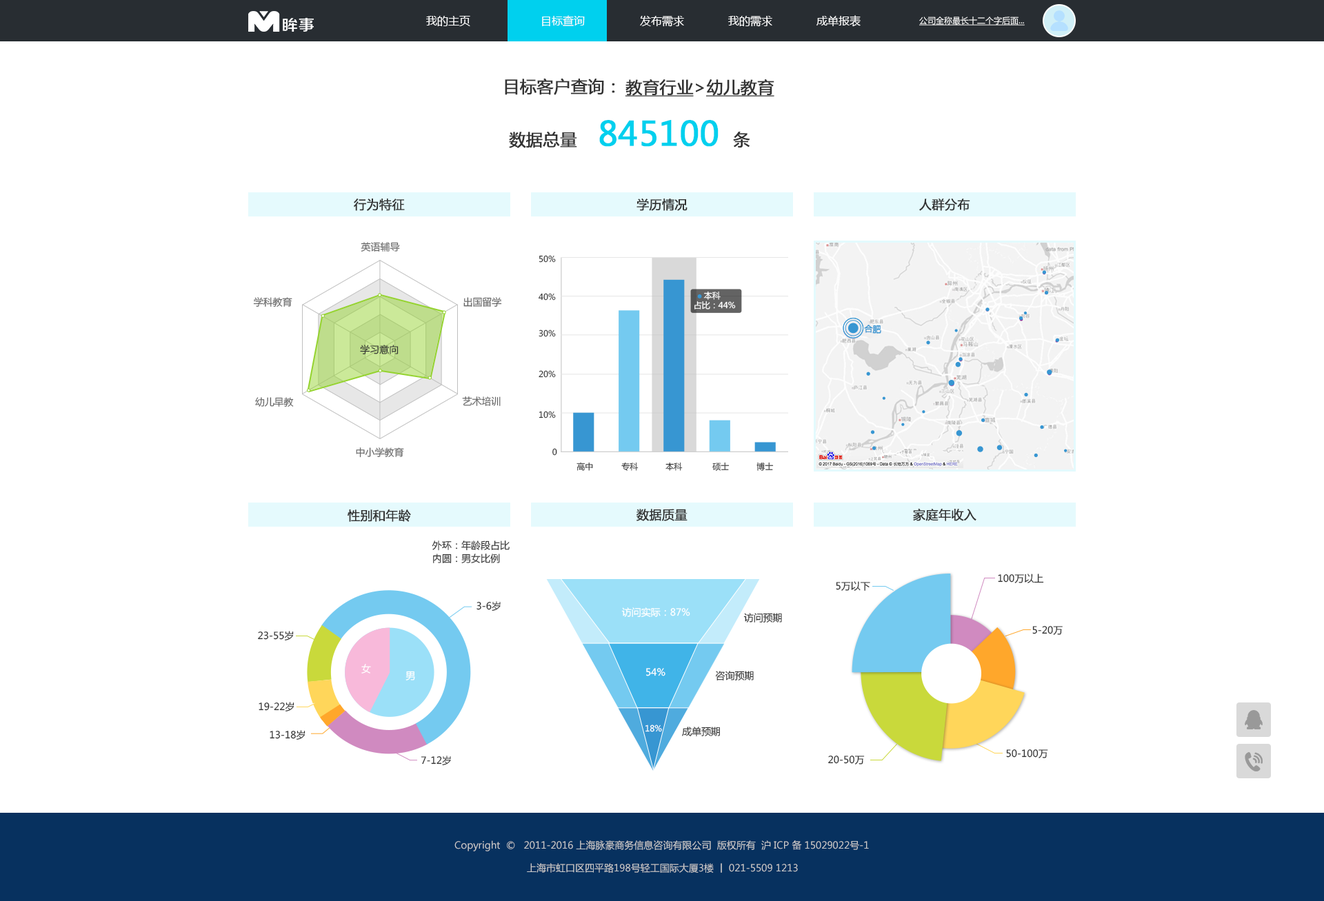
<style>
.page{position:relative;width:1324px;height:901px;background:#ffffff}
.page>*{position:absolute;margin:0}
.t1{font:11px "MicrosoftYaHei";color:#fcfcfc}
.t2{font:8.3px "MicrosoftYaHei";color:#ffffff;text-decoration:underline}
.t3{font:16.5px "MicrosoftYaHei";color:#333333;font-weight:bold}
.t4{font:16.5px "MicrosoftYaHei";color:#333333;font-weight:bold;text-decoration:underline}
.t5{font:33.1px "MicrosoftYaHei";color:#00d0ee;font-weight:bold}
.t6{font:12.4px "MicrosoftYaHei";color:#333333;font-weight:bold}
.t7{font:9.7px "MicrosoftYaHei";color:#666666}
.t8{font:8.3px "MicrosoftYaHei";color:#333333}
.t9{font:8.3px "MicrosoftYaHei";color:#ffffff}
.t10{font:8.3px "MicrosoftYaHei";color:#3796d2;font-weight:bold}
.t11{font:9.7px "MicrosoftYaHei";color:#333333}
.t12{font:8.3px "MicrosoftYaHei"}
.t13{font:9.7px "MicrosoftYaHei";color:#ffffff}
.t14{font:9.7px "MicrosoftYaHei";color:#cccccc}
</style>
<div class="page">
<p class="t1" style="left:426px;top:16px;width:44px;height:10px">我的主页</p>
<p class="t1" style="left:542px;top:15px;width:43px;height:11px">目标查询</p>
<p class="t1" style="left:640px;top:16px;width:44px;height:11px">发布需求</p>
<p class="t1" style="left:728px;top:16px;width:44px;height:11px">我的需求</p>
<p class="t1" style="left:816px;top:15px;width:44px;height:12px">成单报表</p>
<p class="t2" style="left:919px;top:16px;width:105px;height:10px">公司全称最长十二个字后面...</p>
<p class="t3" style="left:505px;top:78px;width:110px;height:17px">目标客户查询：</p>
<p class="t4" style="left:625px;top:79px;width:149px;height:18px">教育行业<span class="t3">&gt;</span>幼儿教育</p>
<p class="t5" style="left:599px;top:120px;width:151px;height:28px">845100 <span class="t3">条</span></p>
<p class="t3" style="left:509px;top:132px;width:68px;height:16px">数据总量</p>
<p class="t6" style="left:354px;top:199px;width:51px;height:12px">行为特征</p>
<p class="t6" style="left:636px;top:199px;width:51px;height:12px">学历情况</p>
<p class="t6" style="left:919px;top:199px;width:51px;height:12px">人群分布</p>
<p class="t7" style="left:361px;top:242px;width:39px;height:10px">英语辅导</p>
<p class="t8" style="left:538px;top:255px;width:18px;height:8px">50%</p>
<p class="t8" style="left:538px;top:293px;width:18px;height:8px">40%</p>
<p class="t9" style="left:703px;top:291px;width:17px;height:9px">本科</p>
<p class="t7" style="left:253px;top:297px;width:39px;height:10px">学科教育</p>
<p class="t7" style="left:463px;top:297px;width:39px;height:10px">出国留学</p>
<p class="t9" style="left:694px;top:301px;width:42px;height:9px">占比：44%</p>
<p class="t8" style="left:538px;top:330px;width:18px;height:7px">30%</p>
<p class="t10" style="left:864px;top:325px;width:17px;height:9px">合肥</p>
<p class="t11" style="left:360px;top:345px;width:38px;height:9px">学习意向</p>
<p class="t8" style="left:538px;top:370px;width:18px;height:8px">20%</p>
<p class="t7" style="left:255px;top:397px;width:39px;height:10px">幼儿早教</p>
<p class="t7" style="left:462px;top:396px;width:38px;height:10px">艺术培训</p>
<p class="t8" style="left:538px;top:411px;width:18px;height:7px">10%</p>
<p class="t7" style="left:356px;top:447px;width:48px;height:11px">中小学教育</p>
<p class="t8" style="left:552px;top:448px;width:5px;height:8px">0</p>
<p class="t8" style="left:576px;top:462px;width:17px;height:9px">高中</p>
<p class="t8" style="left:621px;top:462px;width:17px;height:9px">专科</p>
<p class="t8" style="left:665px;top:462px;width:17px;height:9px">本科</p>
<p class="t8" style="left:712px;top:462px;width:17px;height:9px">硕士</p>
<p class="t12" style="left:756px;top:462px;width:17px;height:9px">博士</p>
<p class="t6" style="left:347px;top:509px;width:64px;height:13px">性别和年龄</p>
<p class="t6" style="left:636px;top:509px;width:51px;height:12px">数据质量</p>
<p class="t6" style="left:913px;top:508px;width:63px;height:13px">家庭年收入</p>
<p class="t11" style="left:432px;top:540px;width:77px;height:11px">外环：年龄段占比</p>
<p class="t11" style="left:433px;top:554px;width:67px;height:9px">内圆：男女比例</p>
<p class="t11" style="left:835px;top:581px;width:35px;height:10px">5万以下</p>
<p class="t11" style="left:997px;top:574px;width:47px;height:9px">100万以上</p>
<p class="t11" style="left:476px;top:601px;width:24px;height:10px">3-6岁</p>
<p class="t13" style="left:621px;top:607px;width:69px;height:11px">访问实际：87%</p>
<p class="t11" style="left:743px;top:613px;width:39px;height:9px">访问预期</p>
<p class="t11" style="left:1032px;top:626px;width:30px;height:9px">5-20万</p>
<p class="t11" style="left:258px;top:631px;width:36px;height:10px">23-55岁</p>
<p class="t13" style="left:361px;top:664px;width:10px;height:9px">女</p>
<p class="t13" style="left:405px;top:671px;width:10px;height:9px">男</p>
<p class="t13" style="left:646px;top:668px;width:19px;height:8px">54%</p>
<p class="t11" style="left:715px;top:671px;width:38px;height:10px">咨询预期</p>
<p class="t11" style="left:258px;top:702px;width:36px;height:10px">19-22岁</p>
<p class="t9" style="left:645px;top:724px;width:17px;height:8px">18%</p>
<p class="t11" style="left:270px;top:730px;width:35px;height:10px">13-18岁</p>
<p class="t11" style="left:682px;top:727px;width:38px;height:10px">成单预期</p>
<p class="t11" style="left:1006px;top:749px;width:42px;height:9px">50-100万</p>
<p class="t11" style="left:420px;top:756px;width:31px;height:10px">7-12岁</p>
<p class="t11" style="left:828px;top:756px;width:36px;height:8px">20-50万</p>
<p class="t14" style="left:454px;top:840px;width:415px;height:11px">Copyright  ©   2011-2016 上海脉豪商务信息咨询有限公司  版权所有  沪 ICP 备 15029022号-1</p>
<p class="t14" style="left:527px;top:863px;width:271px;height:10px">上海市虹口区四平路198号轻工国际大厦3楼 丨 021-5509 1213</p>
</div>
